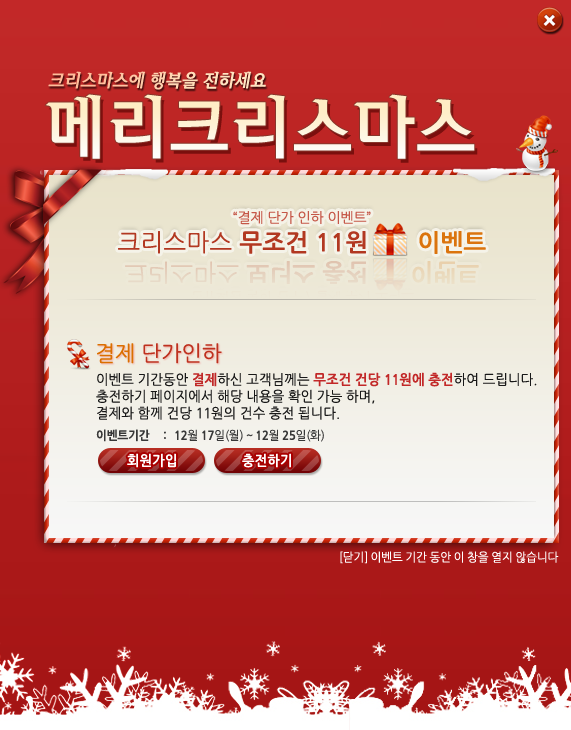
<style>
.page{position:relative;width:571px;height:730px}
.page>*{position:absolute;margin:0}
.t1{font:18px "RixVitaM";color:#ffd5b2;font-style:italic}
.t2{font:68.5px "RixVitaM";color:#fff2d6}
.t3{font:14px/28px "NanumGothic";color:#c55748}
.t4{font:24px/28px "NanumGothic";color:#b23821}
.t5{font:24px/28px "NanumGothicBold";color:#b23821}
.t6{font:24px/28px "NanumGothicBold";color:#db740d}
.t7{font:21.3px "NanumGothic";color:#be311f}
.t8{font:21.3px "NanumGothic";color:#db6f00}
.t9{font:14px "NanumGothic";letter-spacing:-0.025em;color:#181818;scale:0.95 1}
.t10{font:14px "NanumGothicBold";letter-spacing:-0.025em;color:#c02827;scale:0.95 1}
.t11{font:14px "NanumGothicBold";letter-spacing:-0.025em;color:#c22828;scale:0.95 1}
.t12{font:12px "NanumGothicBold";letter-spacing:-0.025em;color:#383838;scale:0.95 1}
.t13{font:12px "NanumGothic";letter-spacing:-0.025em;color:#383838;scale:0.95 1}
.t14{font:14px "NanumGothicBold";letter-spacing:-0.025em;color:#ffffff;scale:0.95 1}
.t15{font:12px "NanumGothic";letter-spacing:-0.025em;color:#ffffff;scale:0.95 1}
</style>
<div class="page">
<p class="t1" style="left:48px;top:71px;width:218px;height:19px">크리스마스에 행복을 전하세요</p>
<p class="t2" style="left:45px;top:94px;width:430px;height:65px">메리크리스마스</p>
<p class="t3" style="left:118px;top:211px;width:368px;height:43px;text-align:center">“결제 단가 인하 이벤트”<br><span class="t4">크리스마스 </span><span class="t5">무조건 11원       </span><span class="t6">이벤트</span></p>
<p class="t7" style="left:97px;top:343px;width:125px;height:21px"><span class="t8">결제 </span>단가인하</p>
<p class="t9" style="left:96px;top:372px;width:441px;height:70px">이벤트 기간동안 <span class="t10">결제</span>하신 고객님께는 <span class="t11">무조건 건당 11원에 충전</span>하여 드립니다.<br>충전하기 페이지에서 해당 내용을 확인 가능 하며,<br>결제와 함께 건당 11원의 건수 충전 됩니다. <br><br><span class="t12">이벤트기간     :   12</span><span class="t13">월 </span><span class="t12">17</span><span class="t13">일(월) ~ </span><span class="t12">12</span><span class="t13">월 </span><span class="t12">25</span><span class="t13">일(화)</span></p>
<p class="t14" style="left:127px;top:453px;width:49px;height:15px">회원가입</p>
<p class="t14" style="left:242px;top:453px;width:49px;height:15px">충전하기</p>
<p class="t15" style="left:340px;top:551px;width:219px;height:13px">[닫기] 이벤트 기간 동안 이 창을 열지 않습니다</p>
</div>
